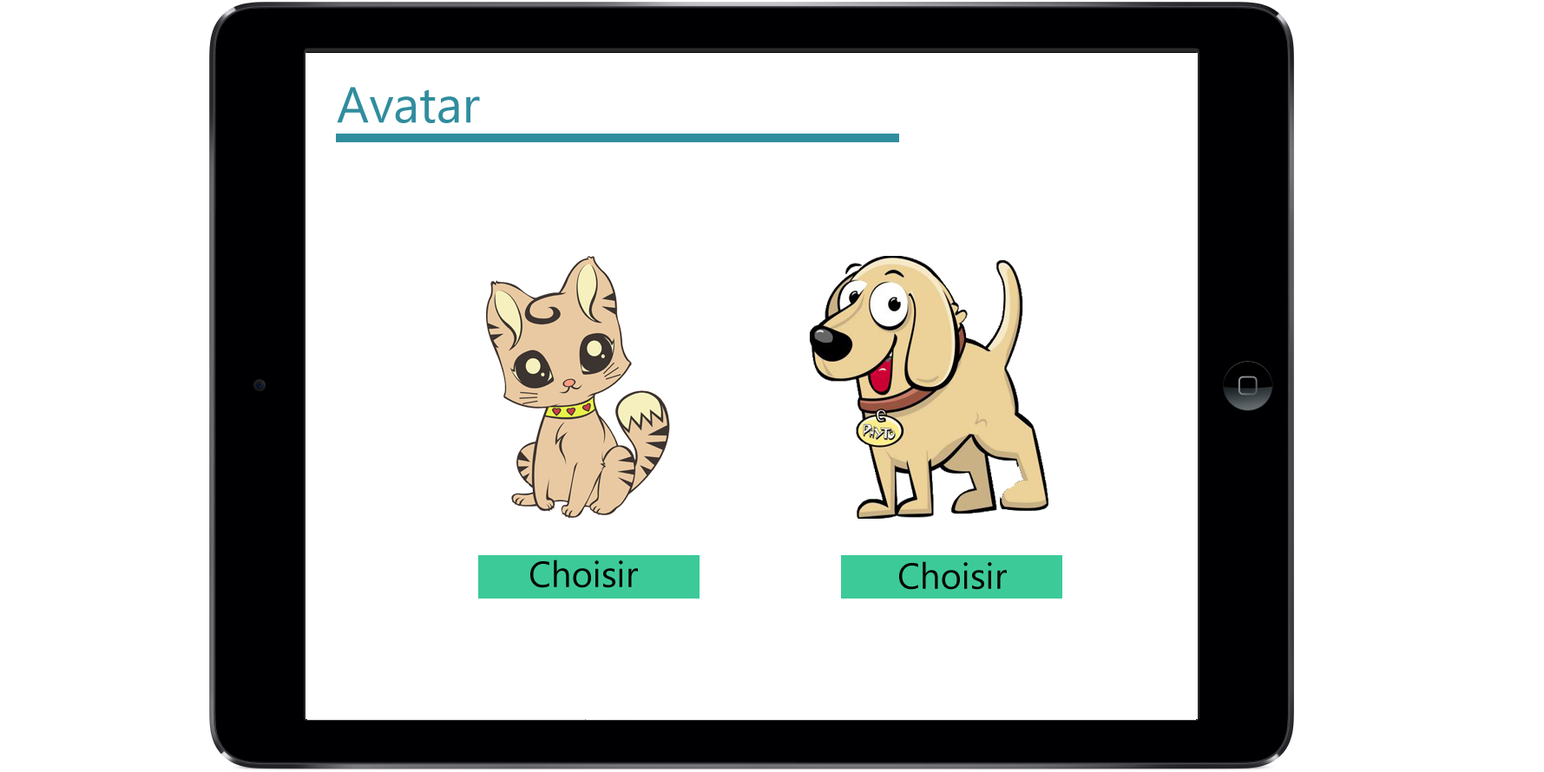
<style>
.page{position:relative;width:1544px;height:772px;background:#ffffff}
.page>*{position:absolute;margin:0}
.t1{font:36.2px "NirmalaUI";color:#050505}
</style>
<div class="page">
<p class="t1" style="left:530px;top:560px;width:108px;height:28px">Choisir</p>
<p class="t1" style="left:899px;top:561px;width:108px;height:29px">Choisir</p>
</div>
